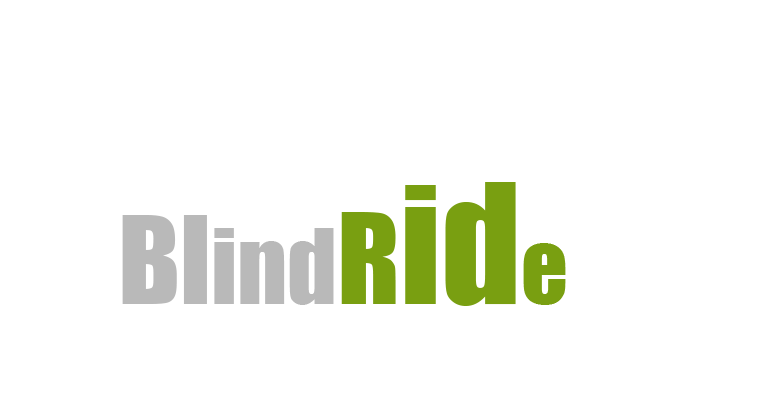
<style>
.page{position:relative;width:784px;height:408px;background:#ffffff}
.page>*{position:absolute;margin:0}
.t1{font:95.8px "Impact";color:#b9b9b9}
.t2{font:112.5px "Impact";color:#b9b9b9}
.t3{font:116.7px "Impact";color:#799f11}
.t4{font:150px "Impact";color:#799f11}
.t5{font:154.2px "Impact";color:#799f11}
.t6{font:91.7px "Impact";color:#799f11}
</style>
<div class="page">
<p class="t1" style="left:122px;top:182px;width:444px;height:124px"><span class="t2">Bl</span>ind<span class="t3">R</span><span class="t4">i</span><span class="t5">d</span><span class="t6">e</span></p>
</div>
